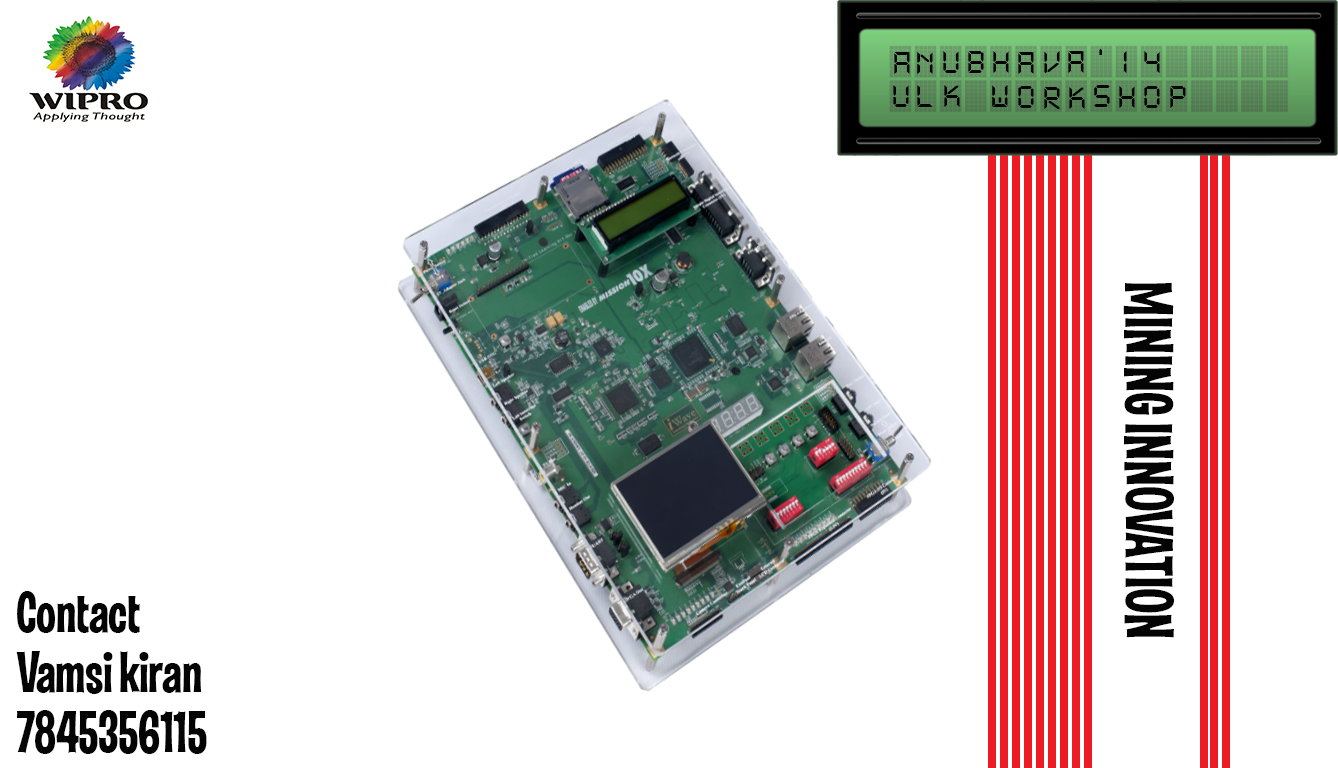
<style>
.page{position:relative;width:1338px;height:768px;background:#ffffff}
.page>*{position:absolute;margin:0}
.t1{font:33.9px "DS-Digital";letter-spacing:-0.01em;color:#040404;scale:1.19 1}
.t2{font:68.6px "LasVegas-Jackpot";letter-spacing:-0.01em;color:#040404}
.t3{font:60px/30px "LasVegas-Jackpot";letter-spacing:-0.01em;color:#040404}
</style>
<div class="page">
<p class="t1" style="left:894px;top:52px;width:16px;height:22px">a</p>
<p class="t1" style="left:917px;top:51px;width:16px;height:24px">n</p>
<p class="t1" style="left:943px;top:51px;width:16px;height:22px">u</p>
<p class="t1" style="left:968px;top:51px;width:16px;height:22px">b</p>
<p class="t1" style="left:993px;top:51px;width:16px;height:22px">h</p>
<p class="t1" style="left:1018px;top:52px;width:16px;height:22px">a</p>
<p class="t1" style="left:1044px;top:51px;width:16px;height:23px">v</p>
<p class="t1" style="left:1068px;top:51px;width:16px;height:22px">a</p>
<p class="t1" style="left:1099px;top:48px;width:3px;height:7px">‘</p>
<p class="t1" style="left:1123px;top:51px;width:4px;height:22px">1</p>
<p class="t1" style="left:1144px;top:51px;width:16px;height:22px">4</p>
<p class="t1" style="left:893px;top:85px;width:16px;height:22px">u</p>
<p class="t1" style="left:917px;top:85px;width:16px;height:22px">l</p>
<p class="t1" style="left:944px;top:85px;width:16px;height:22px">k</p>
<p class="t1" style="left:992px;top:85px;width:16px;height:22px">w</p>
<p class="t1" style="left:1018px;top:86px;width:16px;height:22px">o</p>
<p class="t1" style="left:1044px;top:87px;width:16px;height:22px">r</p>
<p class="t1" style="left:1069px;top:87px;width:16px;height:22px">k</p>
<p class="t1" style="left:1094px;top:85px;width:16px;height:22px">s</p>
<p class="t1" style="left:1119px;top:86px;width:16px;height:22px">h</p>
<p class="t1" style="left:1144px;top:86px;width:16px;height:22px">o</p>
<p class="t1" style="left:1170px;top:86px;width:16px;height:22px">p</p>
<p class="t2" style="left:1123px;top:282px;width:51px;height:356px;rotate:90deg">MINING INNOVATION</p>
<p class="t3" style="left:16px;top:591px;width:191px;height:163px">Contact<br><br>Vamsi kiran<br><br>7845356115</p>
</div>
